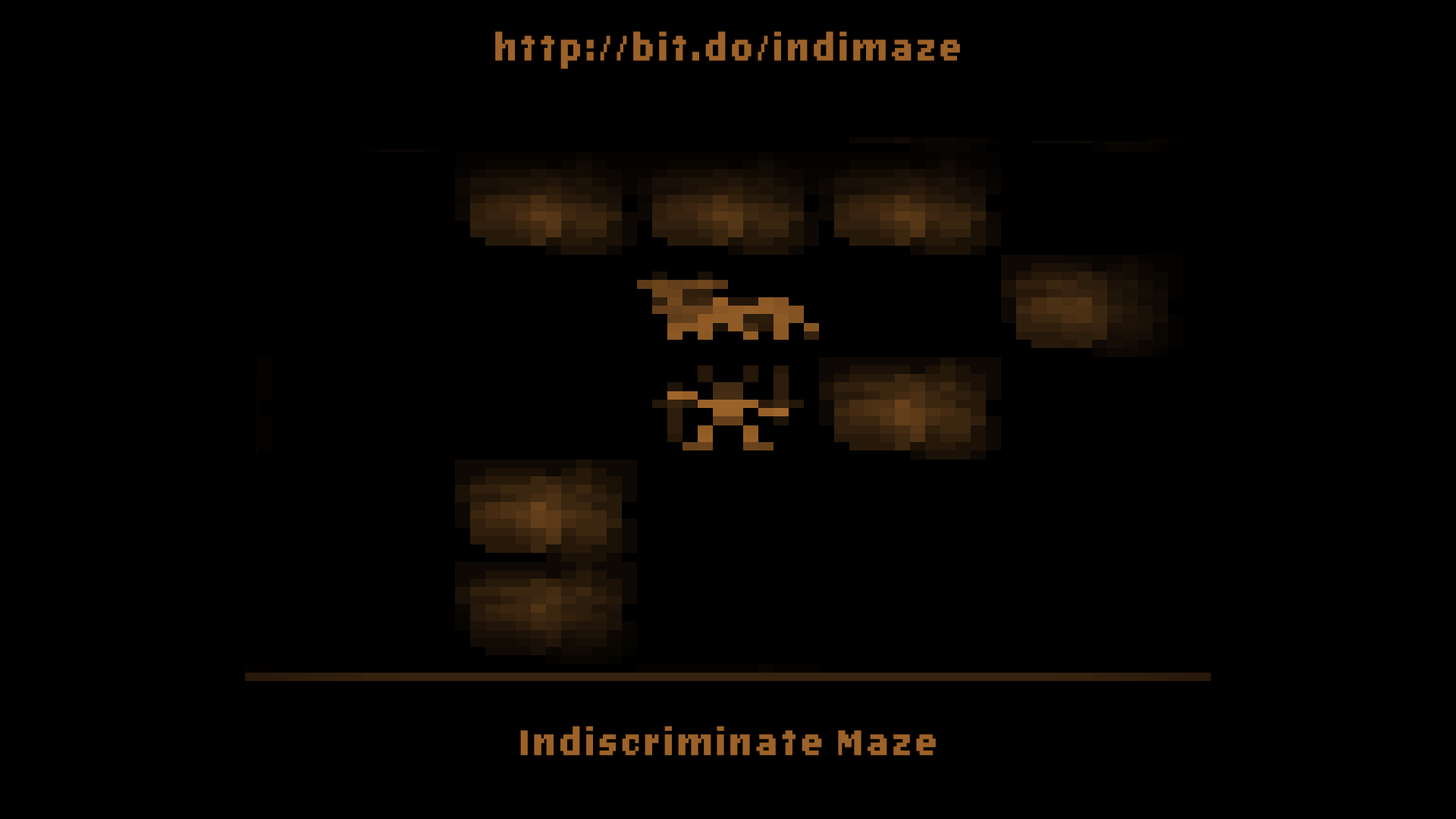
<style>
.page{position:relative;width:1456px;height:819px;background:#000000}
.page>*{position:absolute;margin:0}
.t1{font:36.4px "LoRes9OT-WideBoldAltOakland";color:#9c6229;font-weight:bold;scale:0.78 1}
</style>
<div class="page">
<p class="t1" style="left:495px;top:31px;width:465px;height:38px">http://bit.do/indimaze</p>
<p class="t1" style="left:520px;top:726px;width:416px;height:29px">Indiscriminate Maze</p>
</div>
